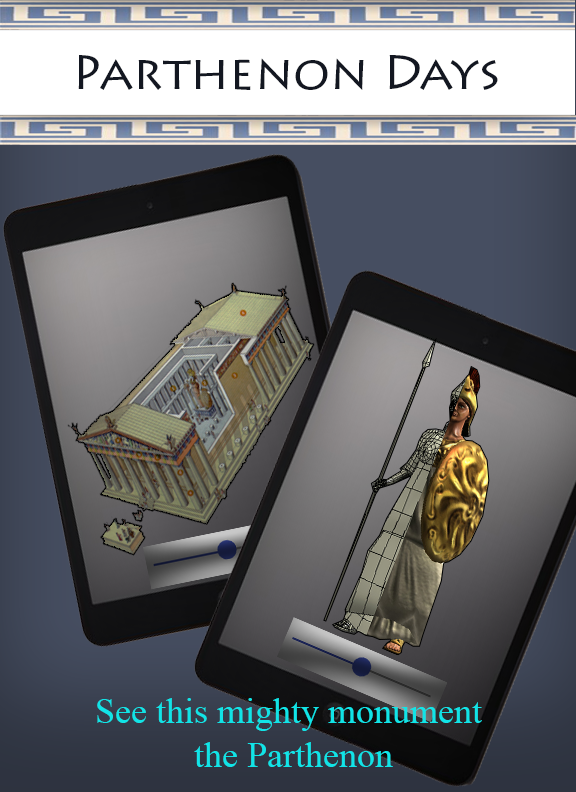
<style>
.page{position:relative;width:576px;height:792px}
.page>*{position:absolute;margin:0}
.t1{font:48px "LithosPro-Regular";color:#131721}
.t2{font:36px "TimesNewRomanPSMT";color:#11e4e7}
</style>
<div class="page">
<p class="t1" style="left:78px;top:55px;width:420px;height:35px">Parthenon Days</p>
<p class="t2" style="left:97px;top:698px;width:385px;height:69px;text-align:center">See this mighty monument  <br>the Parthenon</p>
</div>
